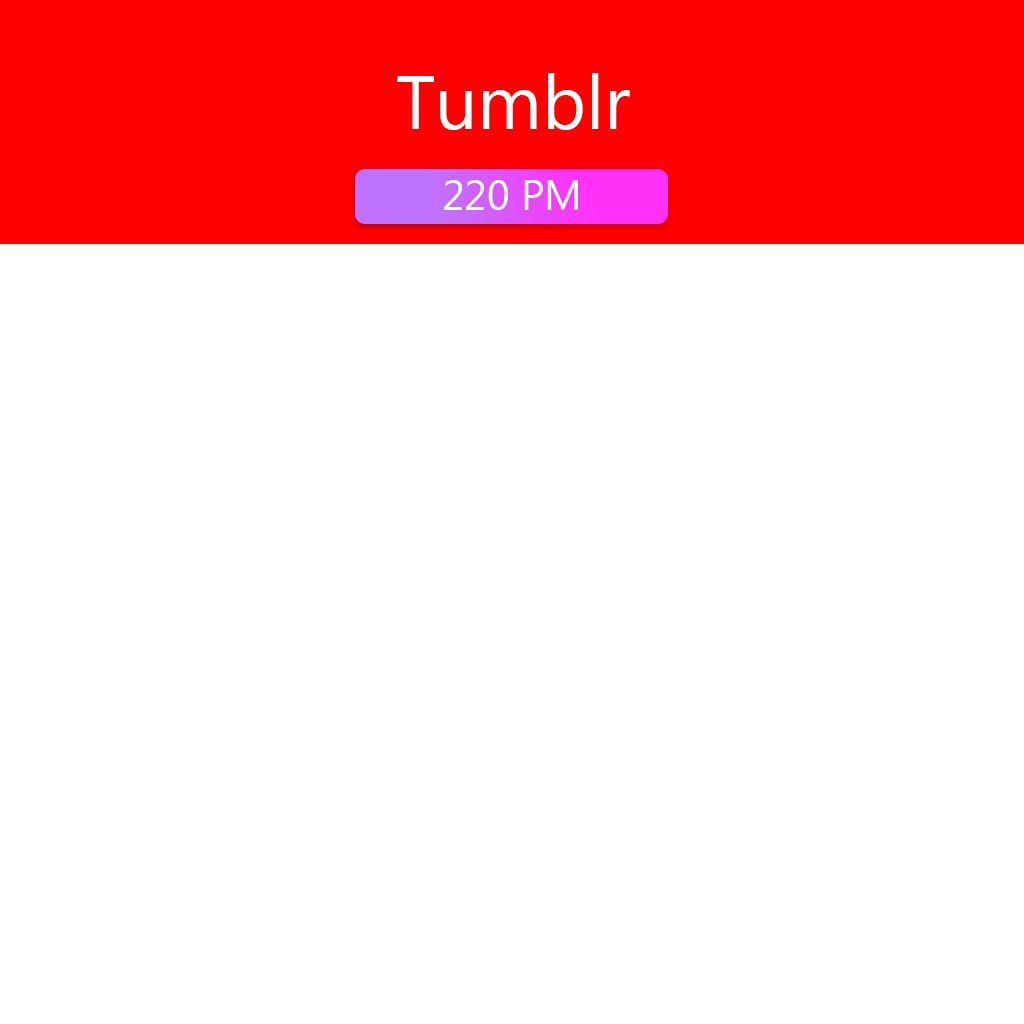
<style>
.page{position:relative;width:1024px;height:1024px;background:#ffffff}
.page>*{position:absolute;margin:0}
.t1{font:75px "MyanmarText";color:#ffffff}
.t2{font:41.7px "MyanmarText";color:#fffefe}
</style>
<div class="page">
<p class="t1" style="left:397px;top:73px;width:233px;height:57px">Tumblr</p>
<p class="t2" style="left:444px;top:180px;width:134px;height:30px">220 PM</p>
</div>
